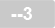
<style>
.page{position:relative;width:55px;height:28px;background:#c9c9c9}
.page>*{position:absolute;margin:0}
.t1{font:18.2px "Arial-BoldMT";color:#ffffff}
</style>
<div class="page">
<p class="t1" style="left:11px;top:7px;width:21px;height:13px">--3</p>
</div>
